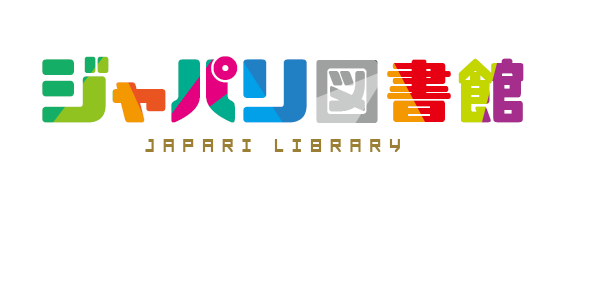
<style>
.page{position:relative;width:600px;height:300px;background:#ffffff}
.page>*{position:absolute;margin:0}
.t1{font:72px "CP&U-Fo"}
.t2{font:24px "FORCED-SQUARE";letter-spacing:0.4em;color:#9b7f34;scale:0.8 1}
</style>
<div class="page">
<p class="t1" style="left:42px;top:56px;width:482px;height:67px">ジャパリ図書館</p>
<p class="t2" style="left:145px;top:139px;width:255px;height:13px">JAPARI LIBRARY</p>
</div>
